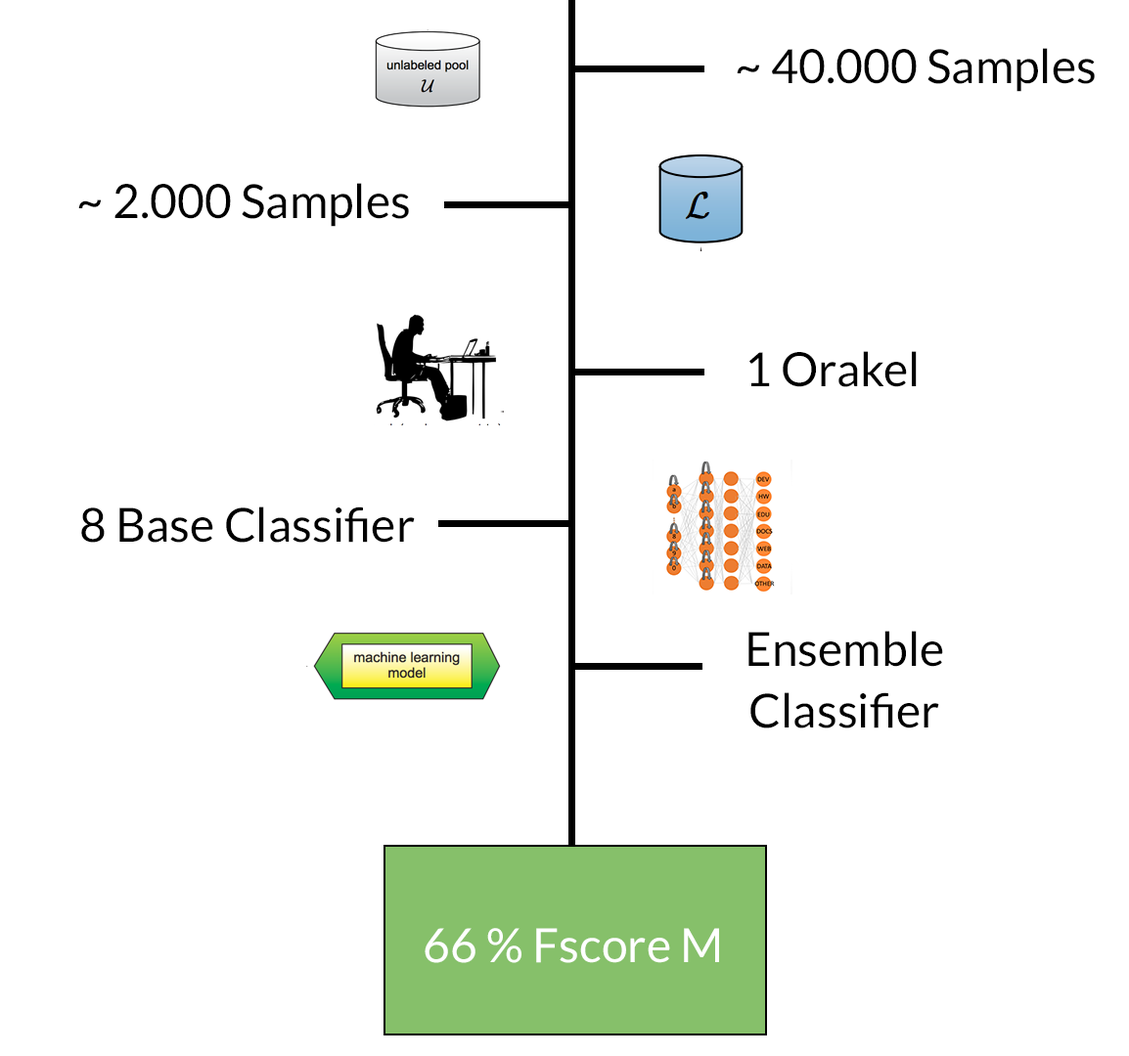
<style>
.page{position:relative;width:1129px;height:1056px;background:#ffffff}
.page>*{position:absolute;margin:0}
.t1{font:47px "Lato-Regular";color:#010101}
.t2{font:47px "Lato-Regular";color:#000000}
.t3{font:47px "Lato-Regular";color:#ffffff}
</style>
<div class="page">
<p class="t1" style="left:737px;top:48px;width:358px;height:44px">~ 40.000 Samples</p>
<p class="t2" style="left:78px;top:183px;width:331px;height:44px">~ 2.000 Samples</p>
<p class="t2" style="left:749px;top:351px;width:168px;height:36px">1 Orakel</p>
<p class="t2" style="left:81px;top:507px;width:334px;height:36px">8 Base Classifier</p>
<p class="t2" style="left:748px;top:631px;width:195px;height:98px;text-align:center">Ensemble<br>Classifier</p>
<p class="t3" style="left:425px;top:928px;width:294px;height:35px">66 % Fscore M</p>
</div>
